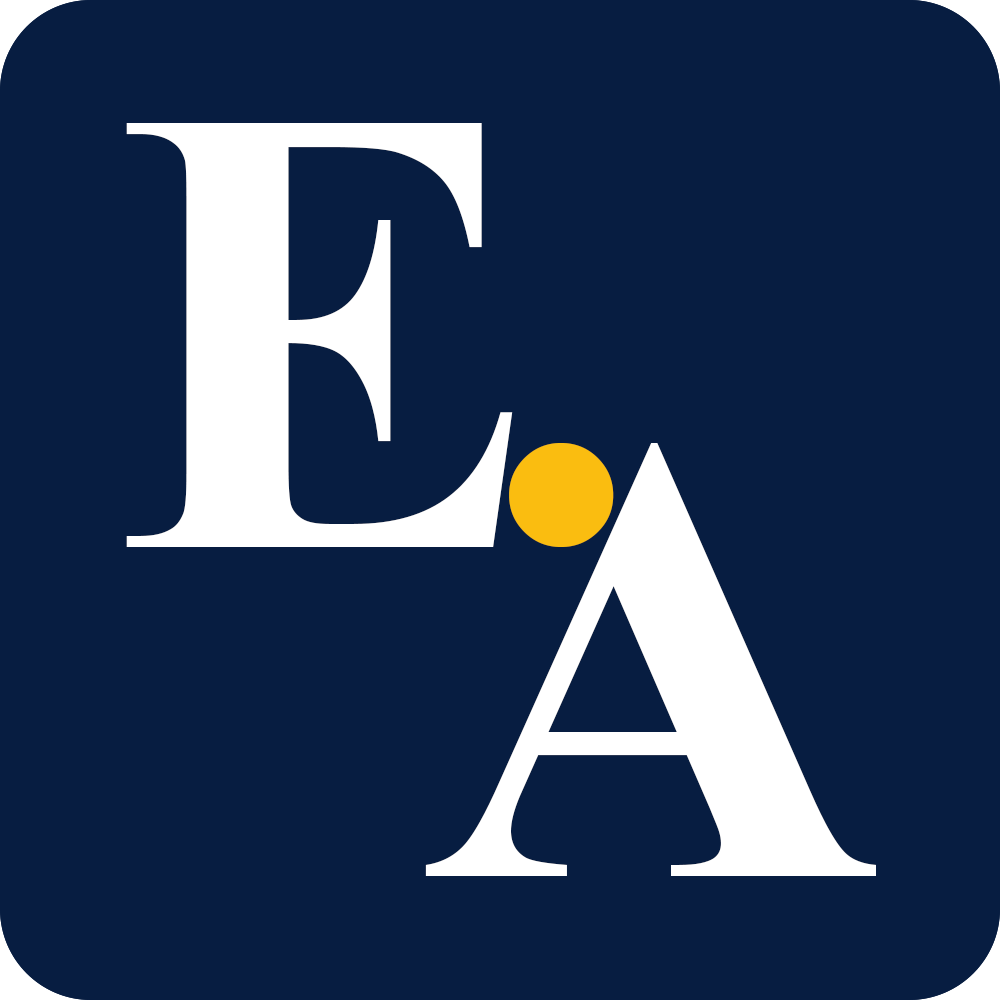
<style>
.page{position:relative;width:1000px;height:1000px;background:#071d41}
.page>*{position:absolute;margin:0}
.t1{font:640.2px "TimesNewRomanPS-BoldMT";letter-spacing:0.16em;color:#ffffff}
.t2{font:640.2px "TimesNewRomanPS-BoldMT";color:#ffffff}
.t3{font:640.2px "TimesNewRomanPS-BoldMT";letter-spacing:0.16em;color:#fabd10}
</style>
<div class="page">
<p class="t1" style="left:126px;top:123px;width:387px;height:424px">E</p>
<p class="t2" style="left:425px;top:443px;width:451px;height:433px">A</p>
<p class="t3" style="left:509px;top:443px;width:105px;height:104px">.</p>
</div>
